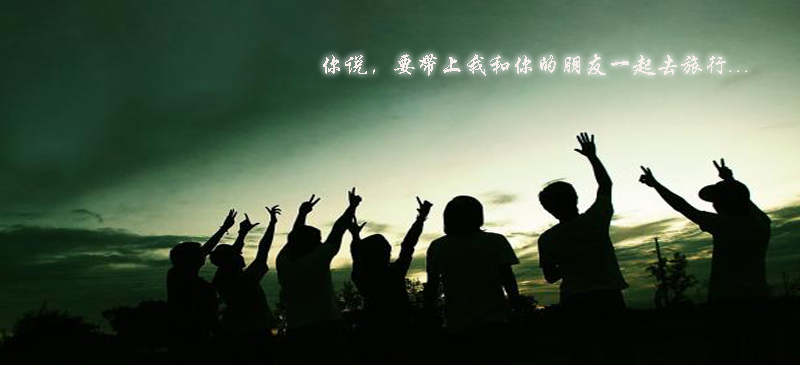
<style>
.page{position:relative;width:800px;height:365px}
.page>*{position:absolute;margin:0}
.t1{font:24px "STXingkai";color:#f5eeea}
</style>
<div class="page">
<p class="t1" style="left:323px;top:54px;width:424px;height:22px">你说，要带上我和你的朋友一起去旅行...</p>
</div>
